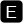
<style>
.page{position:relative;width:24px;height:24px;background:#000000}
.page>*{position:absolute;margin:0}
.t1{font:17.8px "Quicksand-Regular";color:#ffffff;scale:1.18 1}
</style>
<div class="page">
<p class="t1" style="left:6px;top:6px;width:11px;height:12px">E</p>
</div>
